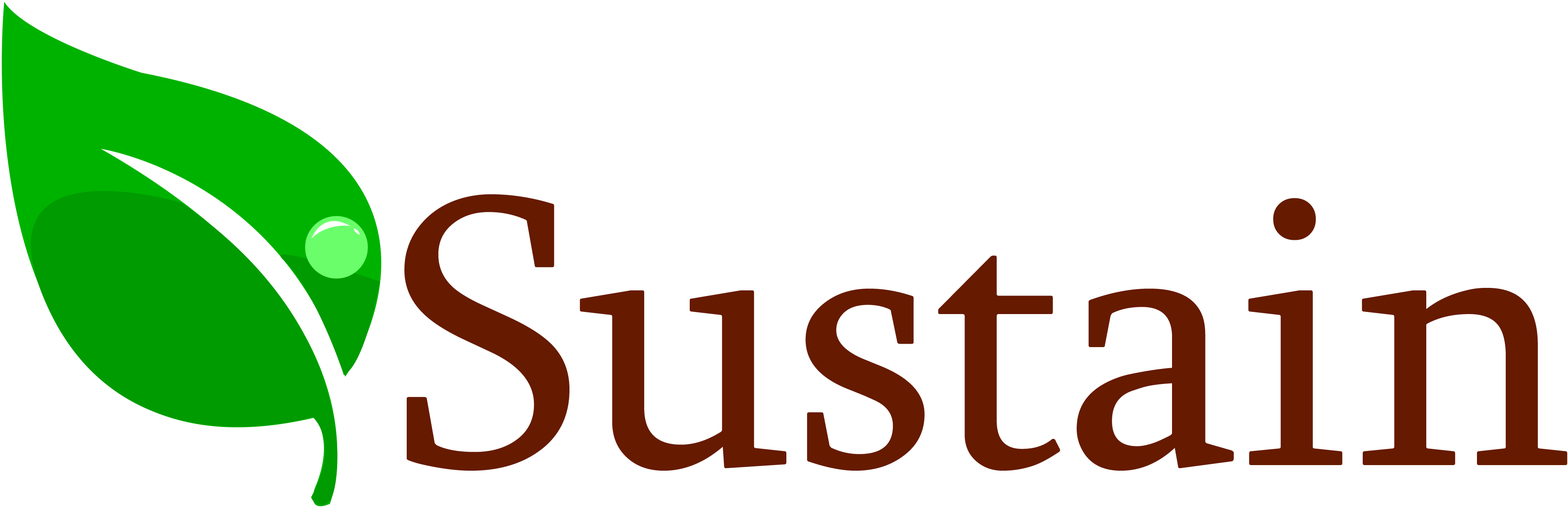
<style>
.page{position:relative;width:1568px;height:508px;background:#ffffff}
.page>*{position:absolute;margin:0}
.t1{font:393.9px "Sylfaen";color:#661a00}
</style>
<div class="page">
<p class="t1" style="left:404px;top:194px;width:1164px;height:277px">Sustain</p>
</div>
